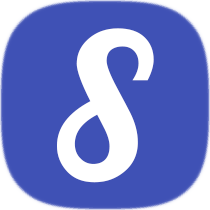
<style>
.page{position:relative;width:210px;height:210px;background:#3f51b5}
.page>*{position:absolute;margin:0}
.t1{font:200px "LilyScriptOne-Regular";color:#ffffff}
</style>
<div class="page">
<p class="t1" style="left:57px;top:28px;width:97px;height:155px">S</p>
</div>
